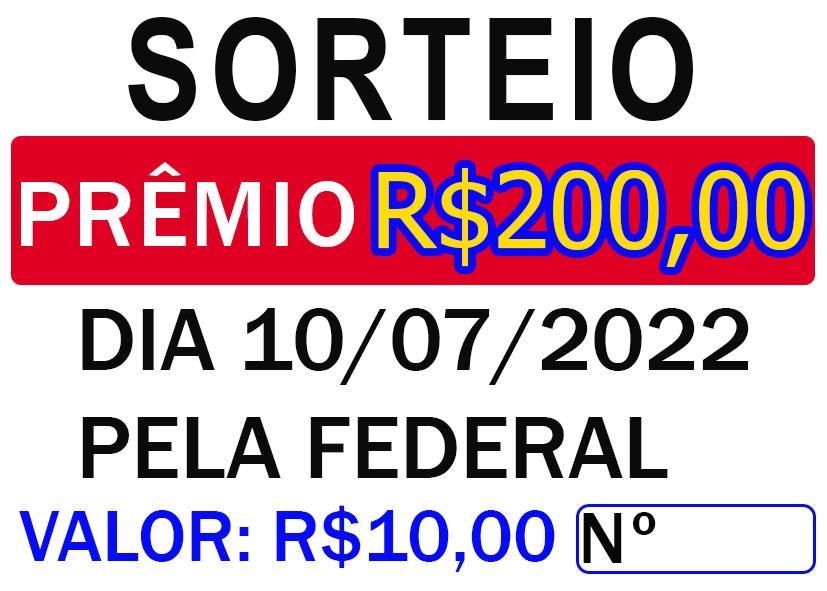
<style>
.page{position:relative;width:827px;height:591px;background:#ffffff}
.page>*{position:absolute;margin:0}
.t1{font:141.7px "ArialNarrow-Bold";letter-spacing:0.06em;color:#0b0b0b}
.t2{font:95.8px "FranklinGothic-Medium";letter-spacing:0.02em;color:#ffffff}
.t3{font:104.2px "Tahoma";color:#fddd04}
.t4{font:91.7px/108.3px "FranklinGothic-Medium";color:#0b0b0b}
.t5{font:75px "FranklinGothic-Medium";color:#060cfa}
.t6{font:75px "FranklinGothic-Medium";letter-spacing:0.06em;color:#060606}
</style>
<div class="page">
<p class="t1" style="left:128px;top:17px;width:565px;height:104px">SORTEIO</p>
<p class="t2" style="left:21px;top:162px;width:333px;height:85px">PRÊMIO</p>
<p class="t3" style="left:378px;top:168px;width:427px;height:99px">R$200,00</p>
<p class="t4" style="left:82px;top:308px;width:667px;height:170px">DIA 10/07/2022<br>PELA FEDERAL</p>
<p class="t5" style="left:19px;top:505px;width:536px;height:67px">VALOR: R$10,00</p>
<p class="t6" style="left:583px;top:512px;width:73px;height:51px">Nº</p>
</div>
